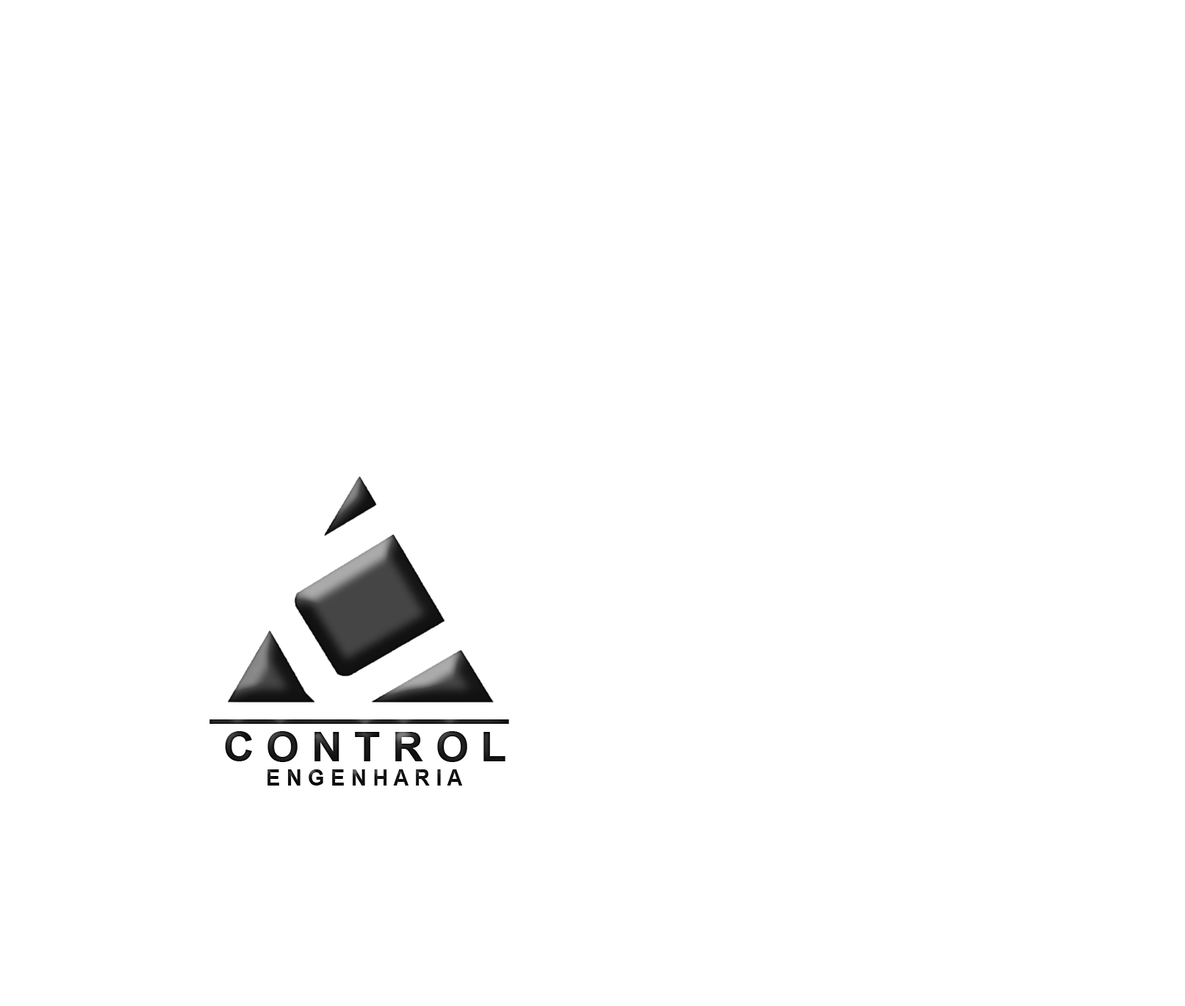
<style>
.page{position:relative;width:1185px;height:1006px;background:#ffffff}
.page>*{position:absolute;margin:0}
.t1{font:41.5px "Arial-BoldMT";color:#181818;scale:1.03 1}
.t2{font:21.8px "Arial-BoldMT";color:#000000}
</style>
<div class="page">
<p class="t1" style="left:225px;top:731px;width:281px;height:31px">C O N T R O L</p>
<p class="t2" style="left:267px;top:769px;width:195px;height:17px">E N G E N H A R I A</p>
</div>
